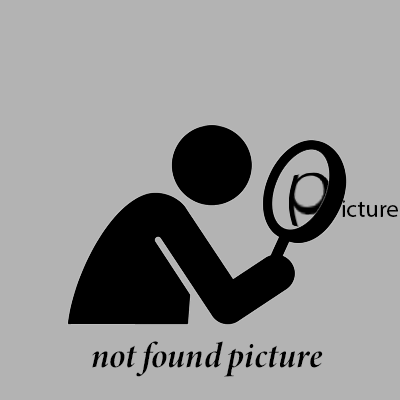
<style>
.page{position:relative;width:400px;height:400px;background:#b3b3b3}
.page>*{position:absolute;margin:0}
.t1{font:24px "MyriadPro-Regular";color:#000000}
.t2{font:36px "MinionConceptItalic-DisplayBoldItalic";color:#000000}
</style>
<div class="page">
<p class="t1" style="left:342px;top:200px;width:56px;height:17px">icture</p>
<p class="t2" style="left:92px;top:341px;width:231px;height:36px">not found picture</p>
</div>
